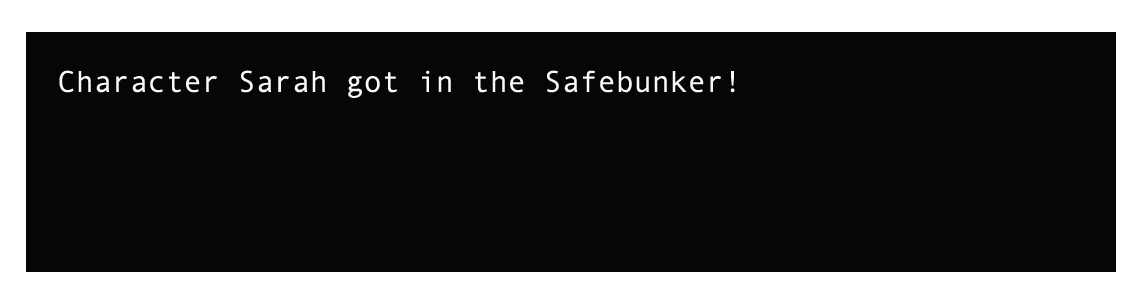
<style>
.page{position:relative;width:1134px;height:308px;background:#070606}
.page>*{position:absolute;margin:0}
.t1{font:30px "AndaleMono";color:#f8f9f9}
</style>
<div class="page">
<p class="t1" style="left:59px;top:70px;width:676px;height:28px">Character Sarah got in the Safebunker!</p>
</div>
